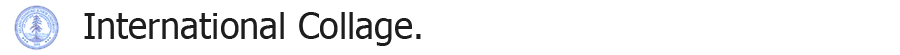
<style>
.page{position:relative;width:900px;height:55px;background:#ffffff}
.page>*{position:absolute;margin:0}
.t1{font:36px "Tahoma";color:#1d1d1d}
</style>
<div class="page">
<p class="t1" style="left:84px;top:12px;width:337px;height:34px">International Collage.</p>
</div>
